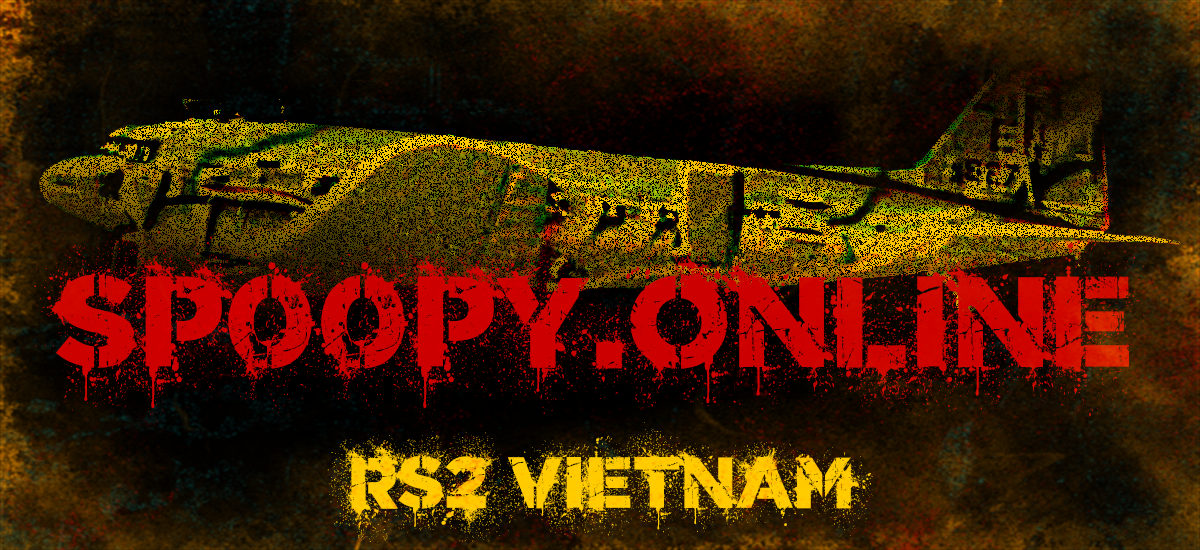
<style>
.page{position:relative;width:1200px;height:550px}
.page>*{position:absolute;margin:0}
.t1{font:128px "WorldConflict-Regular";color:#cc0000}
.t2{font:72px/24px "WorldConflict-Regular";color:#ffcc00}
</style>
<div class="page">
<p class="t1" style="left:34px;top:225px;width:1120px;height:198px">Sp00py.online</p>
<p class="t2" style="left:327px;top:422px;width:546px;height:123px">rs2 vietnam</p>
</div>
